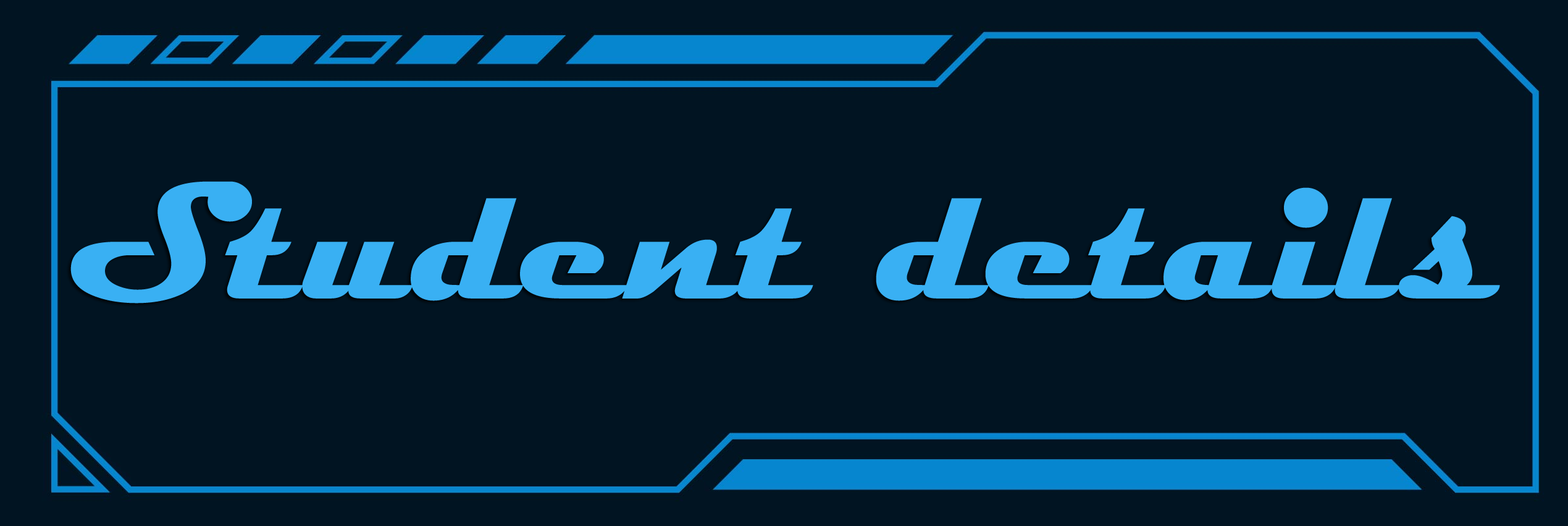
<style>
.page{position:relative;width:1568px;height:526px;background:#011422}
.page>*{position:absolute;margin:0}
.t1{font:169.8px "Magneto-Bold";color:#39b0f3}
</style>
<div class="page">
<p class="t1" style="left:70px;top:181px;width:1430px;height:122px">Student details</p>
</div>
